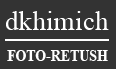
<style>
.page{position:relative;width:116px;height:69px;background:#333333}
.page>*{position:absolute;margin:0}
.t1{font:27.5px "TimesNewRomanPSMT";color:#ffffff}
.t2{font:17.4px "TimesNewRomanPS-BoldMT";color:#ffffff;scale:0.79 1}
</style>
<div class="page">
<p class="t1" style="left:6px;top:11px;width:103px;height:19px">dkhimich</p>
<p class="t2" style="left:7px;top:50px;width:101px;height:11px">FOTO-RETUSH</p>
</div>
